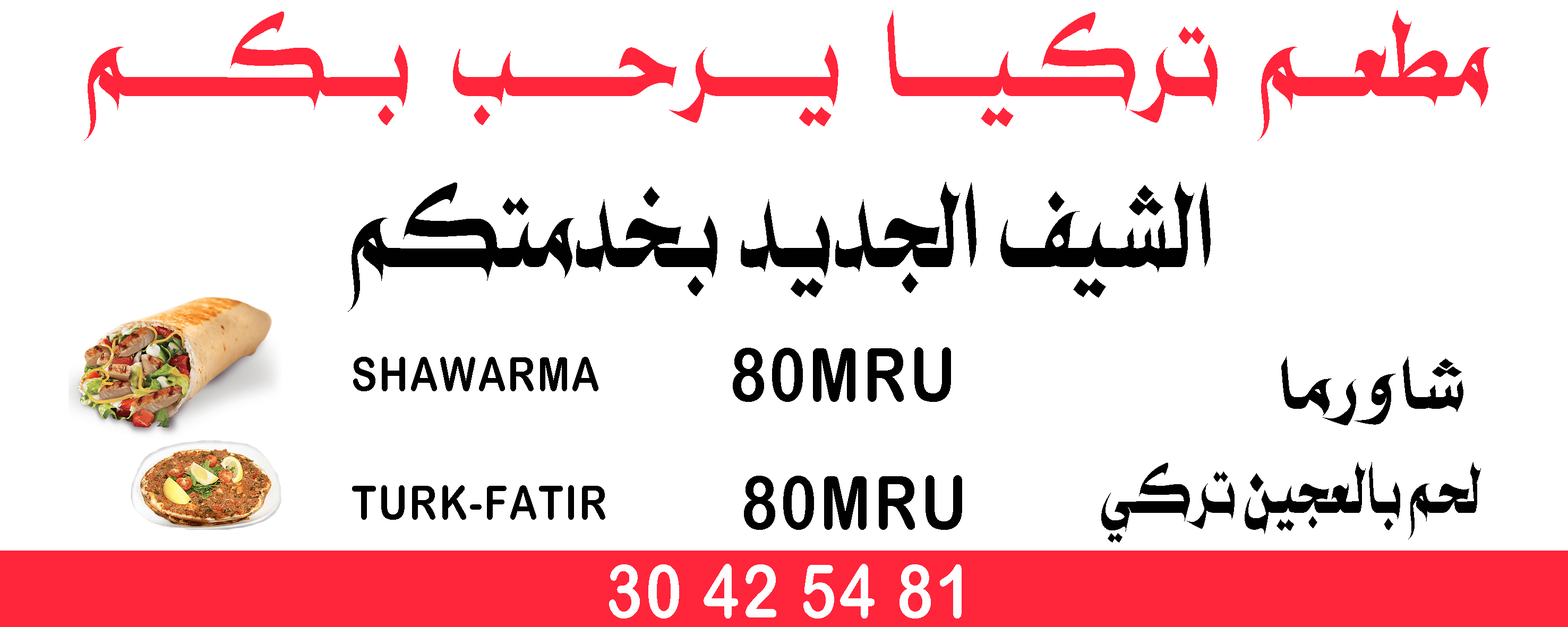
<style>
.page{position:relative;width:1568px;height:627px;background:#ffffff}
.page>*{position:absolute;margin:0}
.t1{font:63.2px/111.9px "Ah-naskh-hadith";letter-spacing:0.05em;color:#ff253a;scale:0.68 1}
.t2{font:63.2px/111.9px "Ah-naskh-hadith";letter-spacing:0.05em;color:#010101;scale:0.68 1}
.t3{font:73.8px "ArialRoundedMTBold";letter-spacing:0.05em;color:#010101;scale:0.83 1}
.t4{font:46.7px "ArialRoundedMTBold";letter-spacing:0.05em;color:#010101;scale:0.83 1}
.t5{font:38.6px/68.3px "Ah-naskh-hadith";letter-spacing:0.05em;color:#010101}
.t6{font:37.9px/67px "Ah-naskh-hadith";letter-spacing:0.05em;color:#010101;scale:0.62 1}
.t7{font:73.8px "ArialRoundedMTBold";letter-spacing:0.05em;color:#fefefe;scale:0.83 1}
</style>
<div class="page">
<p class="t1" style="left:84px;top:10px;width:1406px;height:131px;text-align:center">مطعــــم تركـــيــــــــا يـــــــــــرحـــــــــــب بـــــكـــــــــــم</p>
<p class="t2" style="left:348px;top:182px;width:863px;height:130px;text-align:center">الشيف الجديد بخدمتكم</p>
<p class="t3" style="left:733px;top:347px;width:218px;height:55px">80MRU</p>
<p class="t4" style="left:353px;top:357px;width:245px;height:34px">SHAWARMA</p>
<p class="t5" style="left:1281px;top:356px;width:182px;height:69px;text-align:center">شاورما</p>
<p class="t6" style="left:1101px;top:462px;width:380px;height:81px;text-align:center">لحم بالعجين تركي</p>
<p class="t4" style="left:352px;top:485px;width:253px;height:35px">TURK-FATIR</p>
<p class="t3" style="left:744px;top:475px;width:218px;height:55px">80MRU</p>
<p class="t7" style="left:609px;top:564px;width:353px;height:55px">30 42 54 81</p>
</div>
